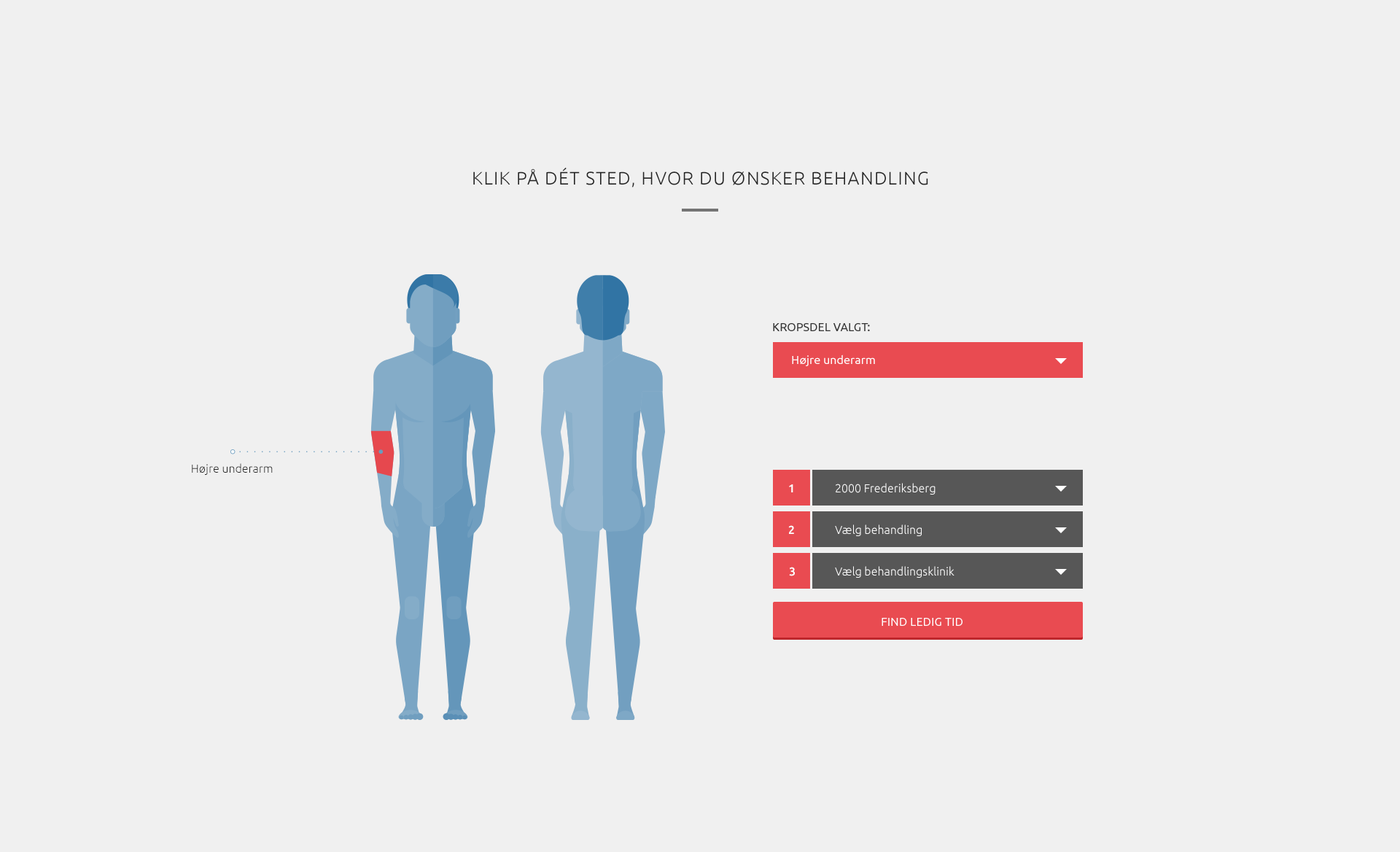
<style>
.page{position:relative;width:1400px;height:852px;background:#f0f0f0}
.page>*{position:absolute;margin:0}
.t1{font:18.2px "Ubuntu-Light";letter-spacing:0.05em;color:#242424;text-transform:uppercase}
.t2{font:11.7px "Ubuntu-Regular";color:#333333;text-transform:uppercase}
.t3{font:11.7px "Ubuntu-Regular";color:#ffffff}
.t4{font:11.7px "Ubuntu-Light";color:#242424}
.t5{font:11.7px "Ubuntu-Medium";color:#fefefe}
.t6{font:11.7px "Ubuntu-Light";color:#ffffff}
</style>
<div class="page">
<p class="t1" style="left:473px;top:167px;width:455px;height:20px">Klik på dÉt sted, hvor du ønsker behandling</p>
<p class="t2" style="left:773px;top:323px;width:97px;height:8px">Kropsdel valgt:</p>
<p class="t3" style="left:792px;top:354px;width:83px;height:12px">Højre underarm</p>
<p class="t3" style="left:792px;top:354px;width:83px;height:12px">Højre underarm</p>
<p class="t4" style="left:192px;top:463px;width:81px;height:12px">Højre underarm</p>
<p class="t5" style="left:789px;top:484px;width:4px;height:8px">1</p>
<p class="t6" style="left:836px;top:483px;width:100px;height:11px">2000 Frederiksberg</p>
<p class="t5" style="left:788px;top:525px;width:6px;height:9px">2</p>
<p class="t6" style="left:835px;top:524px;width:87px;height:12px">Vælg behandling</p>
<p class="t5" style="left:789px;top:567px;width:6px;height:9px">3</p>
<p class="t6" style="left:835px;top:566px;width:120px;height:12px">Vælg behandlingsklinik</p>
<p class="t3" style="left:882px;top:618px;width:81px;height:8px">FIND LEDIG TID</p>
</div>
